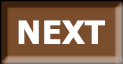
<style>
.page{position:relative;width:123px;height:64px;background:#7a4e2d}
.page>*{position:absolute;margin:0}
.t1{font:32px "Tahoma-Bold";color:#ffffff;font-weight:bold}
</style>
<div class="page">
<p class="t1" style="left:18px;top:20px;width:87px;height:24px">NEXT</p>
</div>
